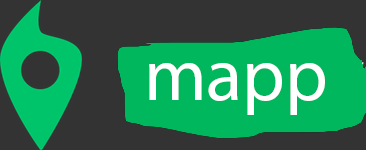
<style>
.page{position:relative;width:366px;height:150px;background:#333333}
.page>*{position:absolute;margin:0}
.t1{font:75px "MyriadPro-Regular";color:#ffffff}
</style>
<div class="page">
<p class="t1" style="left:149px;top:63px;width:176px;height:52px">mapp</p>
</div>
